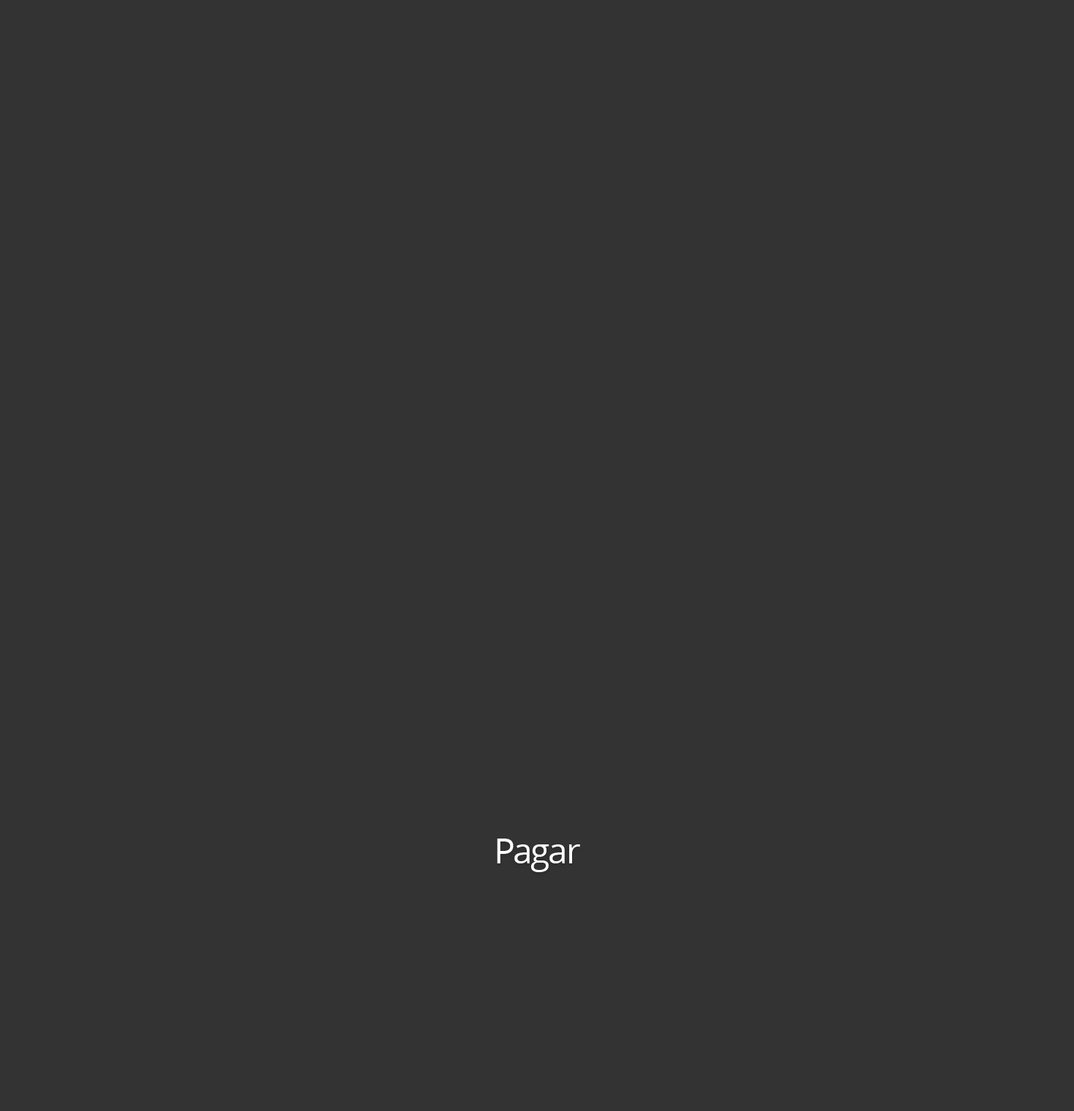
<style>
.page{position:relative;width:1074px;height:1111px;background:#333333}
.page>*{position:absolute;margin:0}
.t1{font:35.1px "OpenSans-Regular";letter-spacing:-0.05em;color:#ffffff}
</style>
<div class="page">
<p class="t1" style="left:497px;top:838px;width:83px;height:34px">Pagar</p>
</div>
